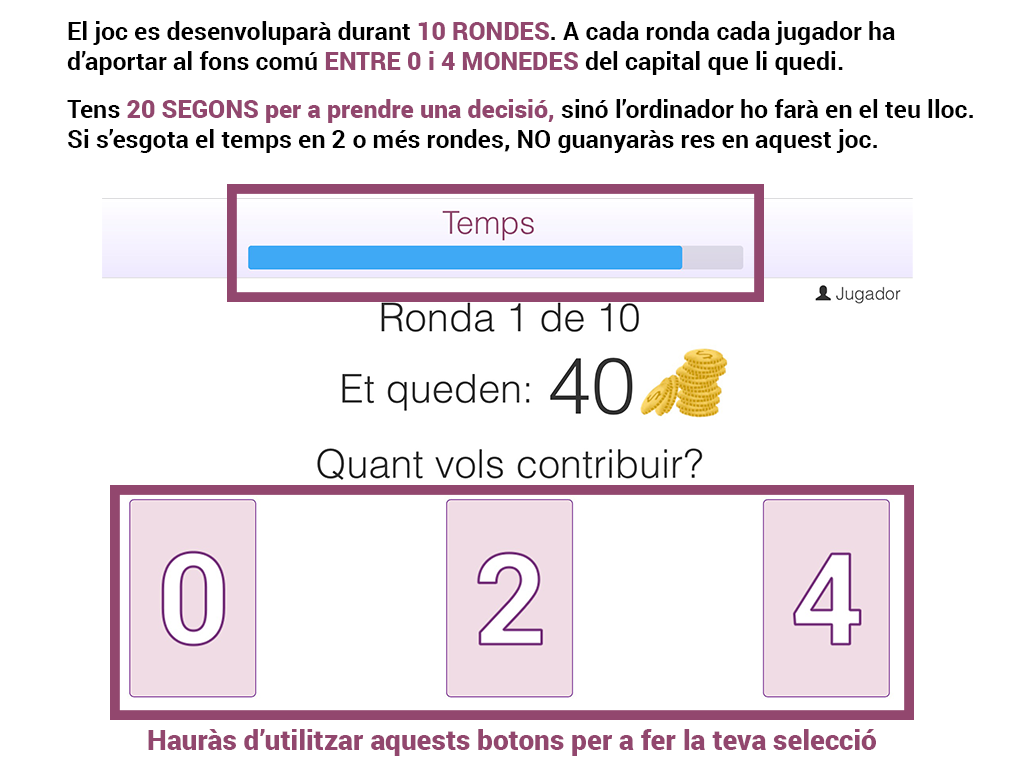
<style>
.page{position:relative;width:1024px;height:768px;background:#ffffff}
.page>*{position:absolute;margin:0}
.t1{font:25px "Roboto-Bold";color:#000000}
.t2{font:25px "Roboto-Black";color:#92476e}
.t3{font:28px "Roboto-Black";color:#92476e}
</style>
<div class="page">
<p class="t1" style="left:67px;top:21px;width:906px;height:132px">El joc es desenvoluparà durant<span class="t2"> 10 RONDES</span>. A cada ronda cada jugador ha<br>d’aportar al fons comú <span class="t2">ENTRE 0 i 4 MONEDES </span>del capital que li quedi.<br><br>Tens <span class="t2">20 SEGONS per a prendre una decisió, </span>sinó l’ordinador ho farà en el teu lloc. <br>Si s’esgota el temps en 2 o més rondes, NO guanyaràs res en aquest joc.</p>
<p class="t3" style="left:148px;top:729px;width:728px;height:27px">Hauràs d’utilitzar aquests botons per a fer la teva selecció</p>
</div>
